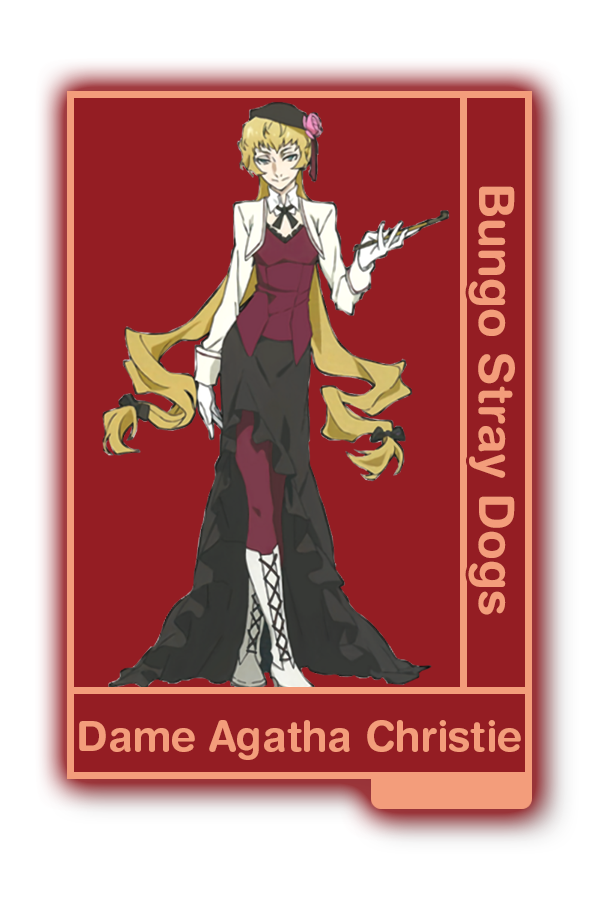
<style>
.page{position:relative;width:600px;height:900px;background:#941d23}
.page>*{position:absolute;margin:0}
.t1{font:48.8px "HelveticaRounded-Bold";color:#f39d7b}
.t2{font:41.2px "HelveticaRounded-Bold";color:#f39d7b}
</style>
<div class="page">
<p class="t1" style="left:468px;top:186px;width:47px;height:429px;rotate:90deg">Bungo Stray Dogs</p>
<p class="t2" style="left:79px;top:720px;width:442px;height:40px">Dame Agatha Christie</p>
</div>
